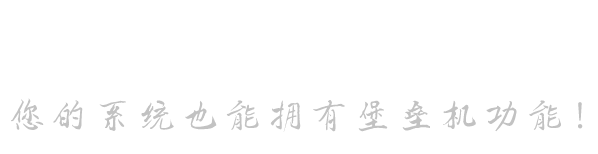
<style>
.page{position:relative;width:598px;height:154px;background:#ffffff}
.page>*{position:absolute;margin:0}
.t1{font:36px "Tensentype-TieShanKaiShuJ";letter-spacing:0.2em;color:#c2c2c2}
</style>
<div class="page">
<p class="t1" style="left:11px;top:98px;width:572px;height:34px">您的系统也能拥有堡垒机功能！</p>
</div>
